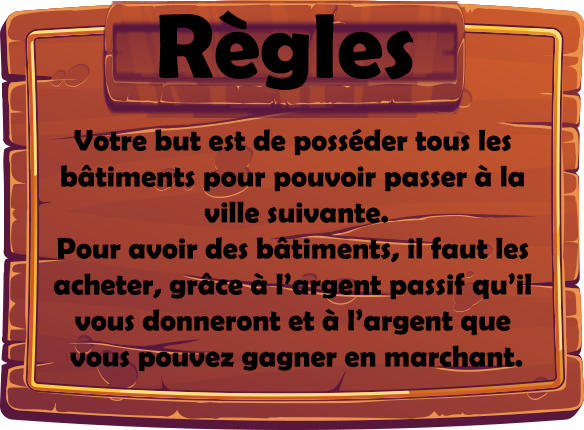
<style>
.page{position:relative;width:584px;height:430px}
.page>*{position:absolute;margin:0}
.t1{font:92px "BerlinSansFBDemi-Bold";color:#000000}
.t2{font:30px "BerlinSansFBDemi-Bold";color:#000000}
</style>
<div class="page">
<p class="t1" style="left:159px;top:10px;width:255px;height:80px">Règles</p>
<p class="t2" style="left:53px;top:128px;width:479px;height:244px;text-align:center">Votre but est de posséder tous les <br>bâtiments pour pouvoir passer à la <br>ville suivante.<br>Pour avoir des bâtiments, il faut les <br>acheter, grâce à l’argent passif qu’il <br>vous donneront et à l’argent que <br>vous pouvez gagner en marchant.</p>
</div>
